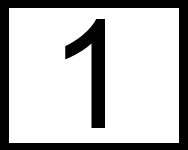
<style>
.page{position:relative;width:188px;height:150px;background:#ffffff}
.page>*{position:absolute;margin:0}
.t1{font:150px "ArialMT";color:#000000}
</style>
<div class="page">
<p class="t1" style="left:65px;top:19px;width:40px;height:109px">1</p>
</div>
